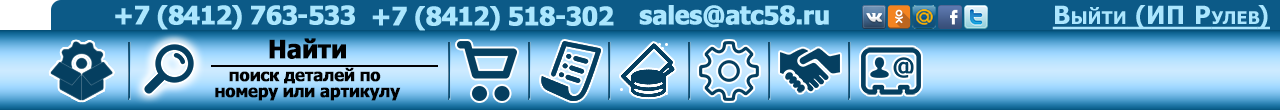
<style>
.page{position:relative;width:1280px;height:110px}
.page>*{position:absolute;margin:0}
.t1{font:25px "Tahoma-Bold";letter-spacing:-0.03em;color:#abe6fe;font-weight:bold}
.t2{font:25px "Tahoma-Bold";letter-spacing:0.03em;color:#abe6fe;font-variant:small-caps;text-decoration:underline}
.t3{font:25px "Tahoma-Bold";letter-spacing:-0.03em;color:#000000;font-weight:bold}
.t4{font:16.7px/16.7px "Tahoma-Bold";letter-spacing:-0.03em;color:#000000;font-weight:bold}
</style>
<div class="page">
<p class="t1" style="left:115px;top:5px;width:240px;height:25px">+7 (8412) 763-533</p>
<p class="t1" style="left:372px;top:6px;width:242px;height:25px">+7 (8412) 518-302</p>
<p class="t1" style="left:639px;top:5px;width:190px;height:23px">sales@atc58.ru</p>
<p class="t2" style="left:1052px;top:5px;width:218px;height:25px">Выйти (ИП Рулев)</p>
<p class="t3" style="left:269px;top:38px;width:77px;height:21px">Найти</p>
<p class="t4" style="left:215px;top:67px;width:186px;height:34px;text-align:center">поиск деталей по <br>номеру или артикулу</p>
</div>
